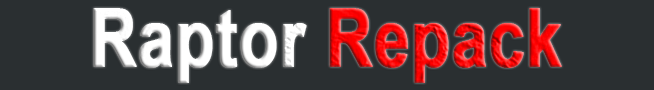
<style>
.page{position:relative;width:654px;height:90px;background:#2a2f31}
.page>*{position:absolute;margin:0}
.t1{font:80px "Arial-BoldMT";color:#ffffff;font-weight:bold;scale:0.8 1}
.t2{font:80px "Arial-BoldMT";color:#ff0000;font-weight:bold;scale:0.8 1}
</style>
<div class="page">
<p class="t1" style="left:93px;top:8px;width:469px;height:75px">Raptor <span class="t2">Repack</span></p>
</div>
